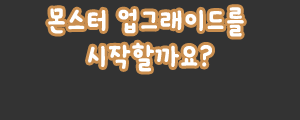
<style>
.page{position:relative;width:300px;height:120px;background:#333333}
.page>*{position:absolute;margin:0}
.t1{font:30px "KoreanCT-R";color:#ffffff}
</style>
<div class="page">
<p class="t1" style="left:48px;top:7px;width:196px;height:65px;text-align:center">몬스터 업그래이드를<br> 시작할까요?</p>
</div>
